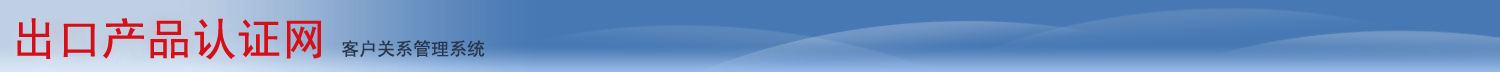
<style>
.page{position:relative;width:1500px;height:72px}
.page>*{position:absolute;margin:0}
.t1{font:45px "SimHei";color:#d60e18}
.t2{font:18px "SimHei";color:#27374e}
</style>
<div class="page">
<p class="t1" style="left:17px;top:18px;width:305px;height:42px">出口产品认证网</p>
<p class="t2" style="left:342px;top:40px;width:143px;height:17px">客户关系管理系统</p>
</div>
